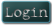
<style>
.page{position:relative;width:52px;height:25px}
.page>*{position:absolute;margin:0}
.t1{font:18px "DumbOldTypewriterNormal"}
</style>
<div class="page">
<p class="t1" style="left:4px;top:7px;width:44px;height:13px">Login</p>
</div>
